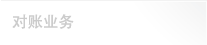
<style>
.page{position:relative;width:207px;height:45px;background:#ffffff}
.page>*{position:absolute;margin:0}
.t1{font:15.5px "STHeitiSC-Medium";color:#cccccc}
</style>
<div class="page">
<p class="t1" style="left:12px;top:14px;width:62px;height:15px">对账业务</p>
</div>
